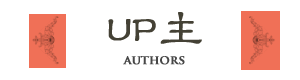
<style>
.page{position:relative;width:300px;height:80px;background:#ffffff}
.page>*{position:absolute;margin:0}
.t1{font:36px "HYf2gj";color:#444135;font-weight:bold}
.t2{font:48px "HYf2gj";color:#444135;font-weight:bold}
.t3{font:12px "TrajanPro-Bold";color:#474747;font-weight:bold}
</style>
<div class="page">
<p class="t1" style="left:108px;top:12px;width:94px;height:32px">UP<span class="t2">主</span></p>
<p class="t3" style="left:123px;top:56px;width:62px;height:9px">authors</p>
</div>
